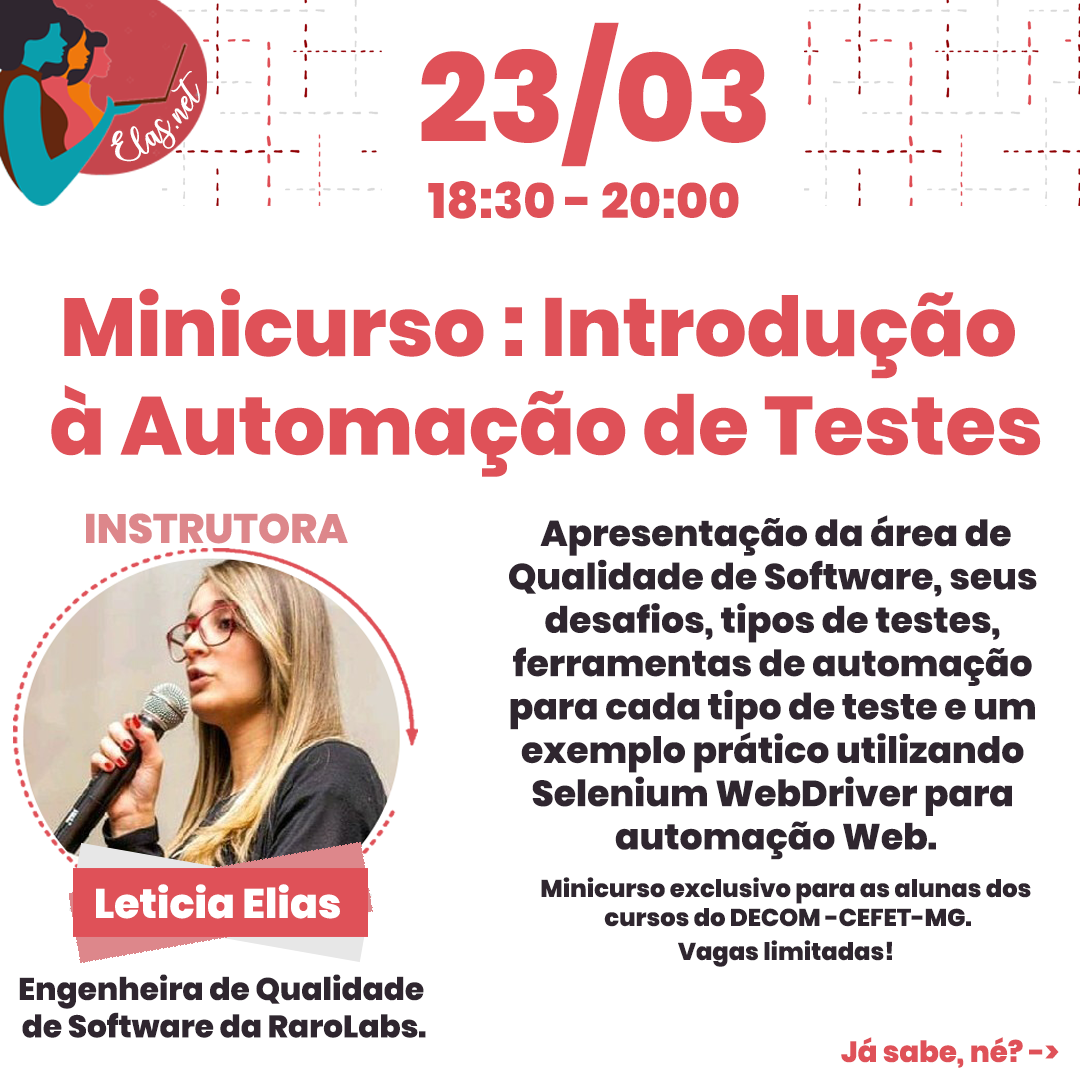
<style>
.page{position:relative;width:1080px;height:1080px;background:#ffffff}
.page>*{position:absolute;margin:0}
.t1{font:125.1px "Poppins-ExtraBold";color:#df5158}
.t2{font:25.7px "charlinda-Regular";color:#ffffff;scale:1.18 1}
.t3{font:49.1px "Poppins-ExtraBold";color:#df5158}
.t4{font:82.1px "Poppins-ExtraBold";color:#df5158}
.t5{font:41px "Poppins-ExtraBold";color:#dd878b;text-transform:uppercase}
.t6{font:36.1px "Poppins-ExtraBold";color:#2f262f}
.t7{font:24.1px "Poppins-ExtraBold";color:#2f262f}
.t8{font:41px "Poppins-ExtraBold";color:#ffffff}
.t9{font:31.1px "Poppins-ExtraBold";color:#2f262f}
.t10{font:29.1px "Poppins-ExtraBold";color:#df5158}
</style>
<div class="page">
<p class="t1" style="left:421px;top:22px;width:345px;height:145px">23/03</p>
<p class="t2" style="left:110px;top:71px;width:90px;height:91px;rotate:-43deg">Elas.net</p>
<p class="t3" style="left:428px;top:181px;width:311px;height:38px">18:30 - 20:00</p>
<p class="t4" style="left:51px;top:288px;width:990px;height:189px;text-align:center">Minicurso : Introdução <br>à Automação de Testes</p>
<p class="t5" style="left:86px;top:513px;width:262px;height:31px">Instrutora</p>
<p class="t6" style="left:509px;top:515px;width:528px;height:345px;text-align:center">Apresentação da área de<br>Qualidade de Software, seus <br>desafios, tipos de testes, <br>ferramentas de automação <br>para cada tipo de teste e um <br>exemplo prático utilizando <br>Selenium WebDriver para <br>automação Web.</p>
<p class="t7" style="left:541px;top:877px;width:490px;height:50px;text-align:center">Minicurso exclusivo para as alunas dos <br>cursos do DECOM -CEFET-MG.</p>
<p class="t8" style="left:96px;top:884px;width:244px;height:35px">Leticia Elias</p>
<p class="t7" style="left:678px;top:940px;width:214px;height:27px">Vagas limitadas!</p>
<p class="t9" style="left:19px;top:974px;width:407px;height:64px;text-align:center">Engenheira de Qualidade <br>de Software da RaroLabs.</p>
<p class="t10" style="left:841px;top:1037px;width:218px;height:31px">Já sabe, né? -&gt;</p>
</div>
